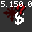
<style>
.page{position:relative;width:32px;height:32px;background:#333333}
.page>*{position:absolute;margin:0}
.t1{font:9px "Consolas";letter-spacing:-0.038em;color:#ffffff}
.t2{font:9px "Consolas";letter-spacing:0.025em;color:#ffffff}
</style>
<div class="page">
<p class="t1" style="left:1px;top:1px;width:31px;height:6px">5.1<span class="t2">5</span>0.0</p>
</div>
